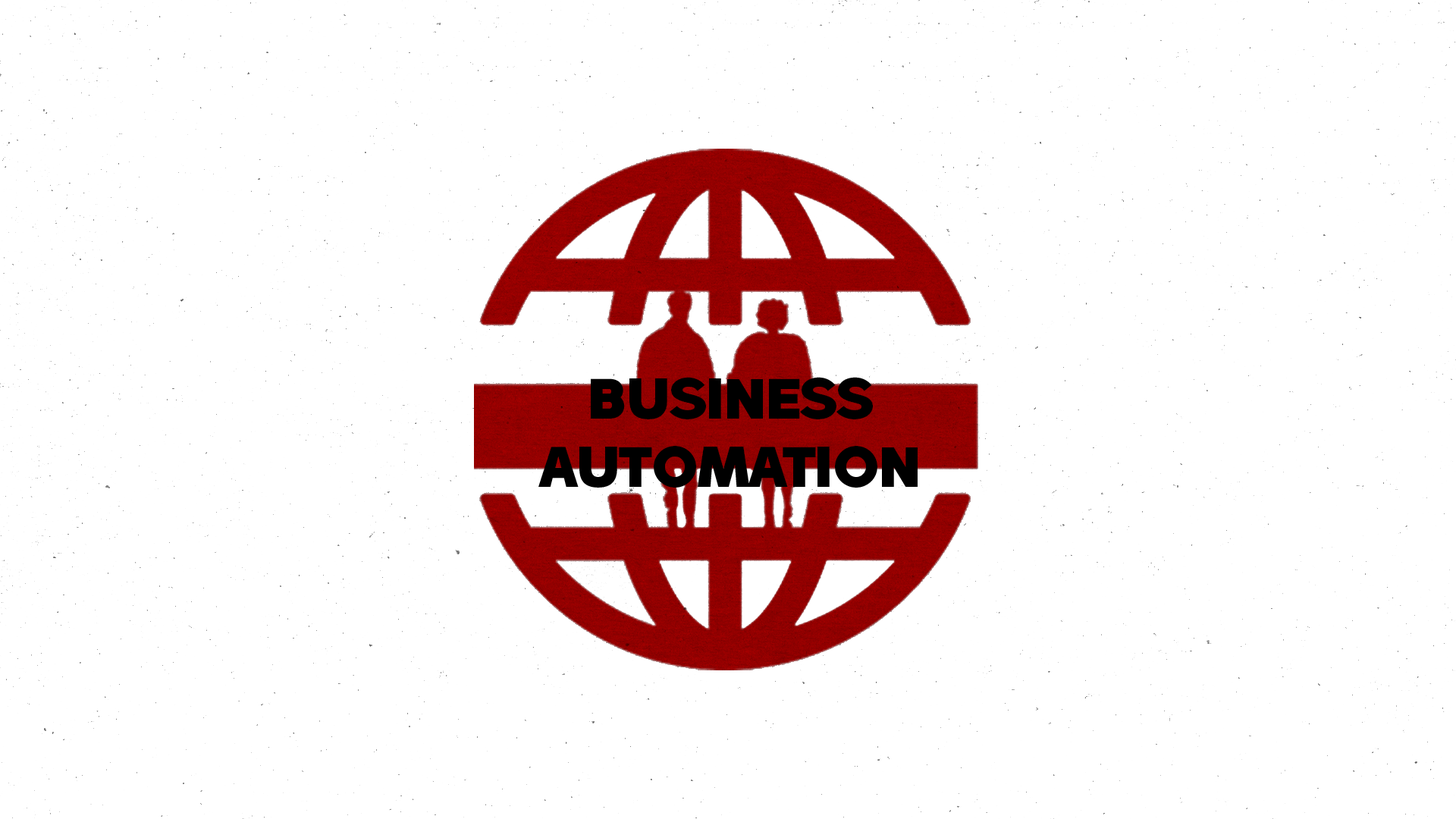
<style>
.page{position:relative;width:1456px;height:819px;background:#ffffff}
.page>*{position:absolute;margin:0}
.t1{font:56.9px "HatschSansPERSONALUSEONLY-Regular";color:#000000}
</style>
<div class="page">
<p class="t1" style="left:538px;top:377px;width:380px;height:111px;text-align:center">BUSINESS<br>AUTOMATION</p>
</div>
